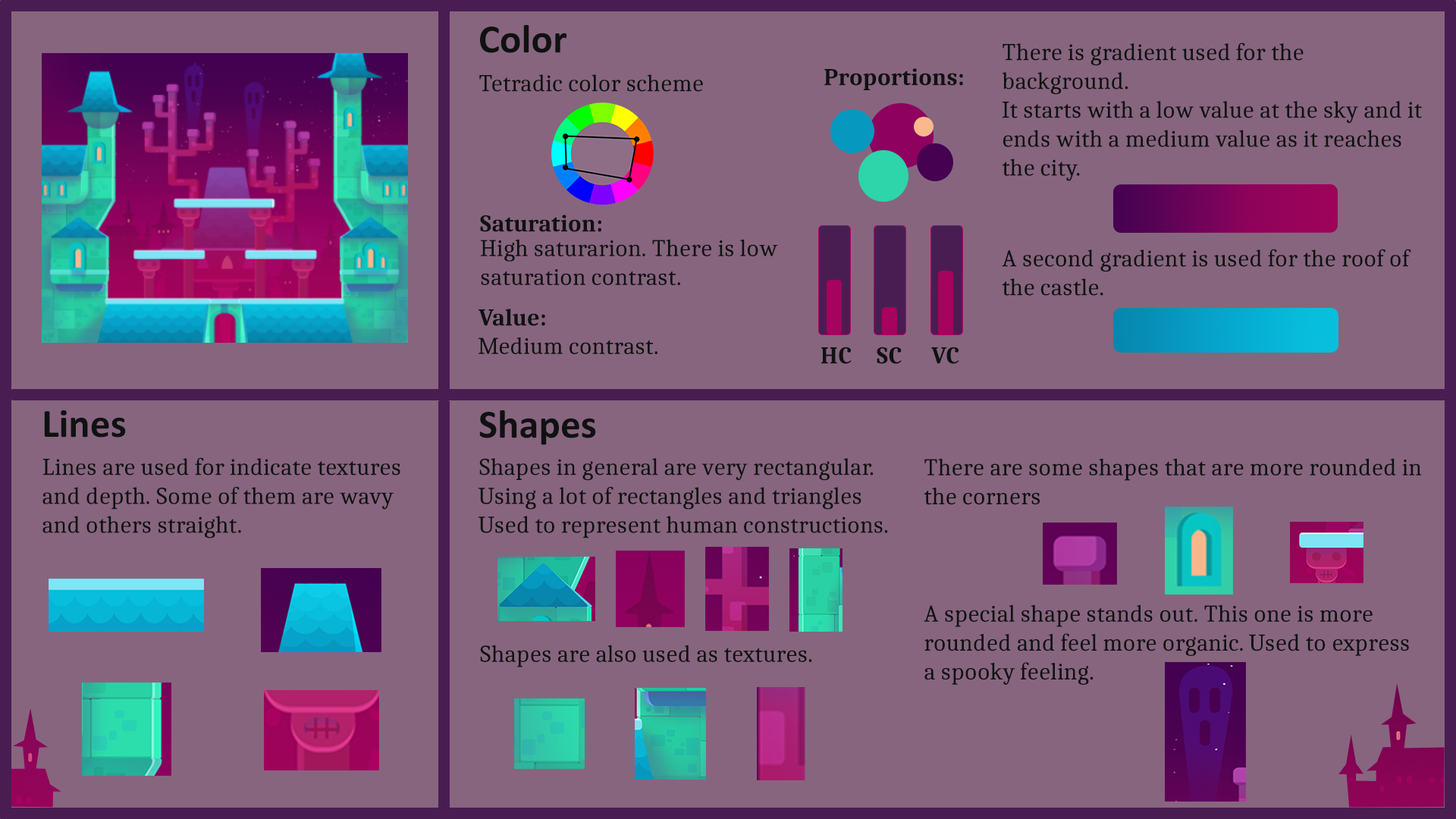
<style>
.page{position:relative;width:1456px;height:819px;background:#87657f}
.page>*{position:absolute;margin:0}
.t1{font:40.1px "Calibri-Bold";color:#0f1211}
.t2{font:24.1px "Caladea-Regular";color:#0f1211}
.t3{font:24.1px "Caladea-Bold";color:#0f1211}
</style>
<div class="page">
<p class="t1" style="left:480px;top:25px;width:86px;height:28px">Color</p>
<p class="t2" style="left:1002px;top:42px;width:420px;height:139px">There is gradient used for the background. <br>It starts with a low value at the sky and it ends with a medium value as it reaches the city.</p>
<p class="t2" style="left:479px;top:74px;width:224px;height:18px">Tetradic color scheme</p>
<p class="t3" style="left:824px;top:68px;width:139px;height:22px">Proportions:</p>
<p class="t3" style="left:480px;top:215px;width:121px;height:17px">Saturation:</p>
<p class="t2" style="left:480px;top:239px;width:298px;height:46px">High saturarion. There is low saturation contrast.</p>
<p class="t2" style="left:1002px;top:249px;width:409px;height:47px">A second gradient is used for the roof of the castle.</p>
<p class="t3" style="left:479px;top:309px;width:66px;height:17px">Value:</p>
<p class="t2" style="left:478px;top:337px;width:179px;height:17px">Medium contrast.</p>
<p class="t3" style="left:821px;top:347px;width:31px;height:17px">HC</p>
<p class="t3" style="left:877px;top:347px;width:25px;height:17px">SC</p>
<p class="t3" style="left:931px;top:347px;width:28px;height:17px">VC</p>
<p class="t1" style="left:44px;top:410px;width:82px;height:28px">Lines</p>
<p class="t1" style="left:479px;top:410px;width:117px;height:35px">Shapes</p>
<p class="t2" style="left:42px;top:457px;width:358px;height:81px">Lines are used for indicate textures and depth. Some of them are wavy and others straight.</p>
<p class="t2" style="left:478px;top:458px;width:410px;height:80px">Shapes in general are very rectangular. Using a lot of rectangles and triangles Used to represent human constructions.</p>
<p class="t2" style="left:924px;top:458px;width:498px;height:47px">There are some shapes that are more rounded in the corners</p>
<p class="t2" style="left:924px;top:604px;width:485px;height:81px">A special shape stands out. This one is more rounded and feel more organic. Used to express a spooky feeling.</p>
<p class="t2" style="left:480px;top:645px;width:332px;height:22px">Shapes are also used as textures.</p>
</div>
